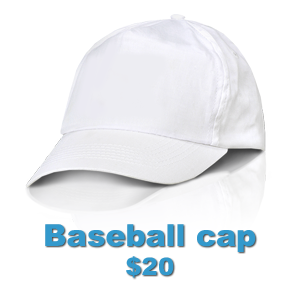
<style>
.page{position:relative;width:300px;height:300px;background:#ffffff}
.page>*{position:absolute;margin:0}
.t1{font:30.2px "Arial-Black";color:#3399cc}
.t2{font:24.2px "Arial-Black";color:#3399cc}
</style>
<div class="page">
<p class="t1" style="left:45px;top:224px;width:211px;height:54px;text-align:center">Baseball cap<br><span class="t2">$20</span></p>
</div>
